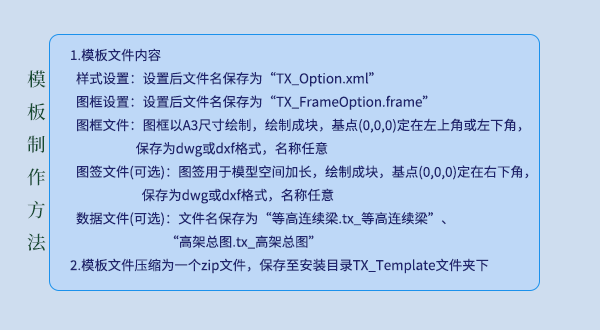
<style>
.page{position:relative;width:600px;height:330px;background:#bed8f7}
.page>*{position:absolute;margin:0}
.t1{font:13.3px "SourceHanSansCN-Regular";color:#20246d}
.t2{font:18.7px "SourceHanSerifCN-Medium";color:#154a31}
</style>
<div class="page">
<p class="t1" style="left:70px;top:48px;width:459px;height:226px">1.模板文件内容<br>  样式设置：设置后文件名保存为“TX_Option.xml”<br>  图框设置：设置后文件名保存为“TX_FrameOption.frame”<br>  图框文件：图框以A3尺寸绘制，绘制成块，基点(0,0,0)定在左上角或左下角，<br>                      保存为dwg或dxf格式，名称任意<br>  图签文件(可选)：图签用于模型空间加长，绘制成块，基点(0,0,0)定在右下角，<br>                        保存为dwg或dxf格式，名称任意<br>  数据文件(可选)：文件名保存为“等高连续梁.tx_等高连续梁”、<br>                                “高架总图.tx_高架总图”<br>2.模板文件压缩为一个zip文件，保存至安装目录TX_Template文件夹下</p>
<p class="t2" style="left:27px;top:70px;width:19px;height:181px">模<br>板<br>制<br>作<br>方<br>法</p>
</div>
